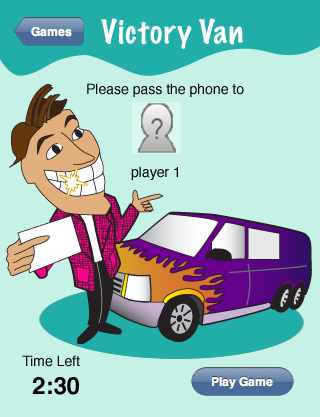
<style>
.page{position:relative;width:320px;height:417px;background:#c6f1e7}
.page>*{position:absolute;margin:0}
.t1{font:30px "MarkerFelt-Thin";color:#fefefe}
.t2{font:14px "Helvetica";color:#000000}
.t3{font:14px/14px "Helvetica";color:#000000}
.t4{font:24px/14px "Helvetica-Bold";color:#000000}
</style>
<div class="page">
<p class="t1" style="left:101px;top:18px;width:142px;height:31px">Victory Van</p>
<p class="t2" style="left:87px;top:83px;width:157px;height:14px">Please pass the phone to</p>
<p class="t2" style="left:131px;top:166px;width:47px;height:14px">player 1</p>
<p class="t3" style="left:22px;top:355px;width:58px;height:40px;text-align:right">Time Left<br><br><span class="t4">2:30</span></p>
</div>
